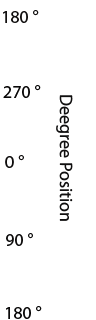
<style>
.page{position:relative;width:96px;height:320px;background:#ffffff}
.page>*{position:absolute;margin:0}
.t1{font:18px "MyriadPro-Regular";color:#121010}
.t2{font:18px "MyriadPro-Regular";color:#090808}
.t3{font:18px "MyriadPro-Regular";color:#100f0f}
.t4{font:18px "MyriadPro-Regular";color:#0f0d0d}
.t5{font:18px "MyriadPro-Regular";color:#0e0d0d}
.t6{font:18px "MyriadPro-Regular";color:#0a0909}
</style>
<div class="page">
<p class="t1" style="left:3px;top:10px;width:36px;height:13px">180 °</p>
<p class="t2" style="left:3px;top:85px;width:38px;height:13px">270 °</p>
<p class="t3" style="left:56px;top:95px;width:17px;height:126px;rotate:90deg">Deegree Position</p>
<p class="t4" style="left:5px;top:155px;width:19px;height:13px">0 °</p>
<p class="t5" style="left:6px;top:233px;width:27px;height:13px">90 °</p>
<p class="t6" style="left:6px;top:306px;width:36px;height:13px">180 °</p>
</div>
